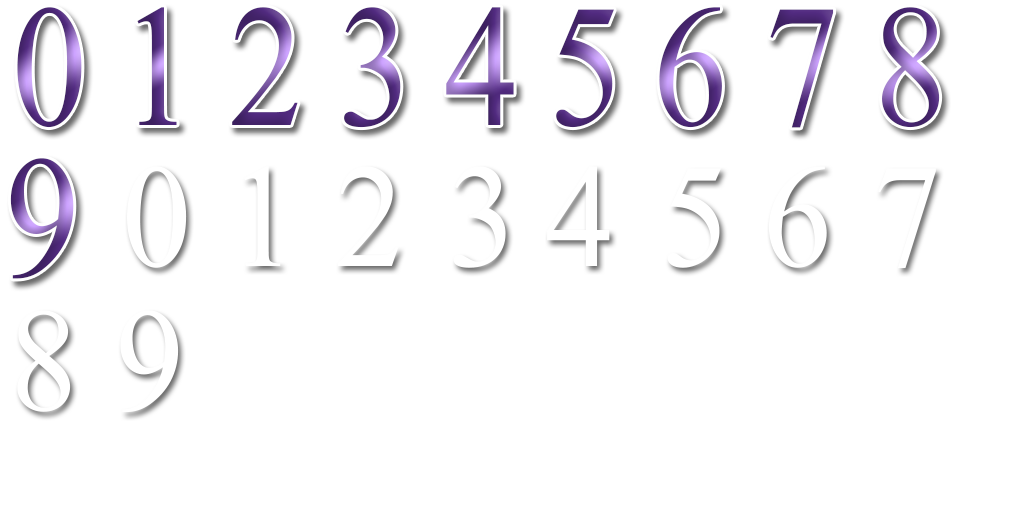
<style>
.page{position:relative;width:1024px;height:512px;background:#ffffff}
.page>*{position:absolute;margin:0}
.t1{font:260px "Microsoft-Himalaya";scale:0.86 1}
.t2{font:220px "Microsoft-Himalaya";color:#ffffff;scale:0.94 1}
</style>
<div class="page">
<p class="t1" style="left:17px;top:7px;width:65px;height:121px">0</p>
<p class="t1" style="left:137px;top:7px;width:40px;height:118px">1</p>
<p class="t1" style="left:232px;top:7px;width:66px;height:118px">2</p>
<p class="t1" style="left:344px;top:7px;width:57px;height:121px">3</p>
<p class="t1" style="left:446px;top:7px;width:68px;height:118px">4</p>
<p class="t1" style="left:556px;top:9px;width:58px;height:119px">5</p>
<p class="t1" style="left:659px;top:7px;width:63px;height:121px">6</p>
<p class="t1" style="left:770px;top:9px;width:64px;height:119px">7</p>
<p class="t1" style="left:882px;top:7px;width:58px;height:121px">8</p>
<p class="t1" style="left:10px;top:158px;width:64px;height:121px">9</p>
<p class="t2" style="left:17px;top:310px;width:54px;height:102px">8</p>
</div>
